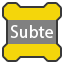
<style>
.page{position:relative;width:64px;height:64px;background:#f4d60b}
.page>*{position:absolute;margin:0}
.t1{font:18.1px "MyriadPro-Regular";color:#ffffff}
</style>
<div class="page">
<p class="t1" style="left:10px;top:25px;width:43px;height:13px">Subte</p>
</div>
